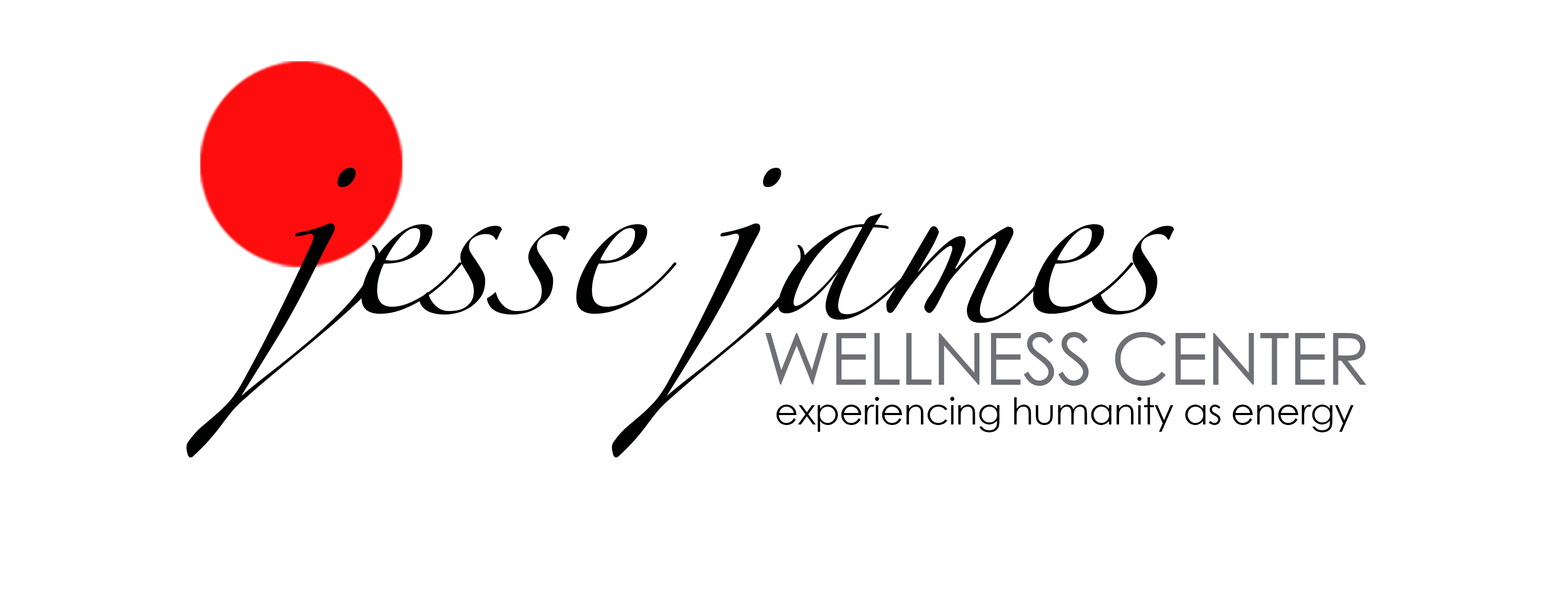
<style>
.page{position:relative;width:1568px;height:609px;background:#ffffff}
.page>*{position:absolute;margin:0}
.t1{font:157.7px "Zapfino";letter-spacing:-0.015em;color:#000101}
.t2{font:72.3px "CenturyGothic";letter-spacing:-0.015em;color:#6f7076}
.t3{font:36.8px "CenturyGothic";letter-spacing:-0.015em;color:#000000}
</style>
<div class="page">
<p class="t1" style="left:186px;top:167px;width:988px;height:291px">jesse james</p>
<p class="t2" style="left:765px;top:332px;width:602px;height:54px">WELLNESS CENTER</p>
<p class="t3" style="left:776px;top:397px;width:578px;height:35px">experiencing humanity as energy</p>
</div>
